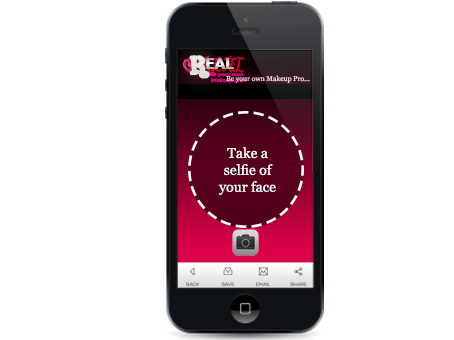
<style>
.page{position:relative;width:454px;height:340px;background:#ffffff}
.page>*{position:absolute;margin:0}
.t1{font:15.8px "BerlinSansFBDemi-Bold"}
.t2{font:5.4px "Calibri-BoldItalic";color:#ec008c;scale:1.19 1}
.t3{font:7px "Georgia";color:#f1c6d3}
.t4{font:14.1px "Georgia";color:#fcfbfb}
</style>
<div class="page">
<p class="t1" style="left:206px;top:58px;width:28px;height:11px">EAL</p>
<p class="t2" style="left:209px;top:72px;width:35px;height:12px">Be your own <br>Makeup Pro</p>
<p class="t3" style="left:226px;top:75px;width:84px;height:8px">Be your own Makeup Pro...</p>
<p class="t4" style="left:218px;top:147px;width:58px;height:48px;text-align:center">Take a<br>selfie of<br>your face</p>
</div>
